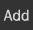
<style>
.page{position:relative;width:33px;height:30px;background:#333333}
.page>*{position:absolute;margin:0}
.t1{font:16px "FranklinGothic-Book";color:#d6d6d6}
</style>
<div class="page">
<p class="t1" style="left:3px;top:9px;width:26px;height:12px">Add</p>
</div>
